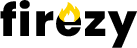
<style>
.page{position:relative;width:137px;height:48px;background:#ffffff}
.page>*{position:absolute;margin:0}
.t1{font:44px "Poppins-ExtraBold";letter-spacing:0.04em;color:#000000}
</style>
<div class="page">
<p class="t1" style="left:0px;top:0px;width:137px;height:48px">firezy</p>
</div>
